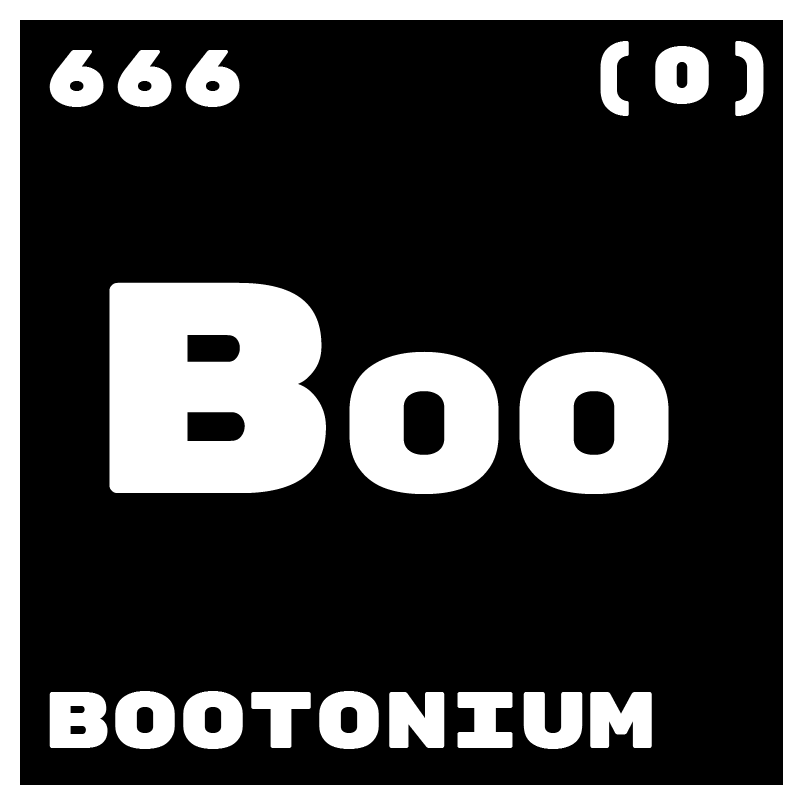
<style>
.page{position:relative;width:800px;height:800px;background:#000000}
.page>*{position:absolute;margin:0}
.t1{font:80px "RubikMonoOne-Regular";color:#ffffff}
.t2{font:200px "RubikMonoOne-Regular";color:#ffffff}
.t3{font:300px "RubikMonoOne-Regular";color:#ffffff}
</style>
<div class="page">
<p class="t1" style="left:600px;top:41px;width:164px;height:75px">(0)</p>
<p class="t1" style="left:49px;top:50px;width:191px;height:57px">666</p>
<p class="t2" style="left:109px;top:282px;width:560px;height:212px"><span class="t3">B</span>oo</p>
<p class="t1" style="left:49px;top:691px;width:603px;height:58px">bootonium</p>
</div>
